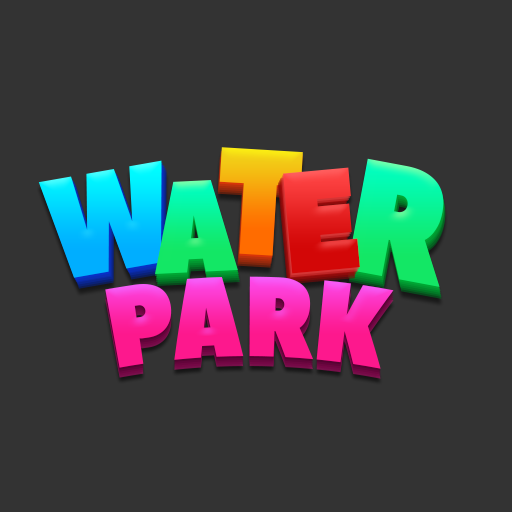
<style>
.page{position:relative;width:512px;height:512px;background:#333333}
.page>*{position:absolute;margin:0}
.t1{font:149.9px "PeaceSans";text-transform:uppercase;scale:0.85 1}
.t2{font:142.7px "PeaceSans";text-transform:uppercase;scale:0.85 1}
.t3{font:161px "PeaceSans";text-transform:uppercase;scale:0.85 1}
.t4{font:143.2px "PeaceSans";text-transform:uppercase;scale:0.85 1}
.t5{font:130.3px "PeaceSans";text-transform:uppercase;scale:0.85 1}
.t6{font:111.7px "PeaceSans";text-transform:uppercase;scale:0.77 1}
</style>
<div class="page">
<p class="t1" style="left:219px;top:147px;width:84px;height:109px;rotate:3deg">T</p>
<p class="t2" style="left:38px;top:160px;width:124px;height:118px;rotate:-10deg">W</p>
<p class="t3" style="left:347px;top:158px;width:97px;height:129px;rotate:11deg">R</p>
<p class="t4" style="left:283px;top:167px;width:77px;height:107px;rotate:-5deg">E</p>
<p class="t5" style="left:155px;top:180px;width:83px;height:94px;rotate:-3deg">A</p>
<p class="t6" style="left:105px;top:276px;width:289px;height:93px">PARK</p>
</div>
